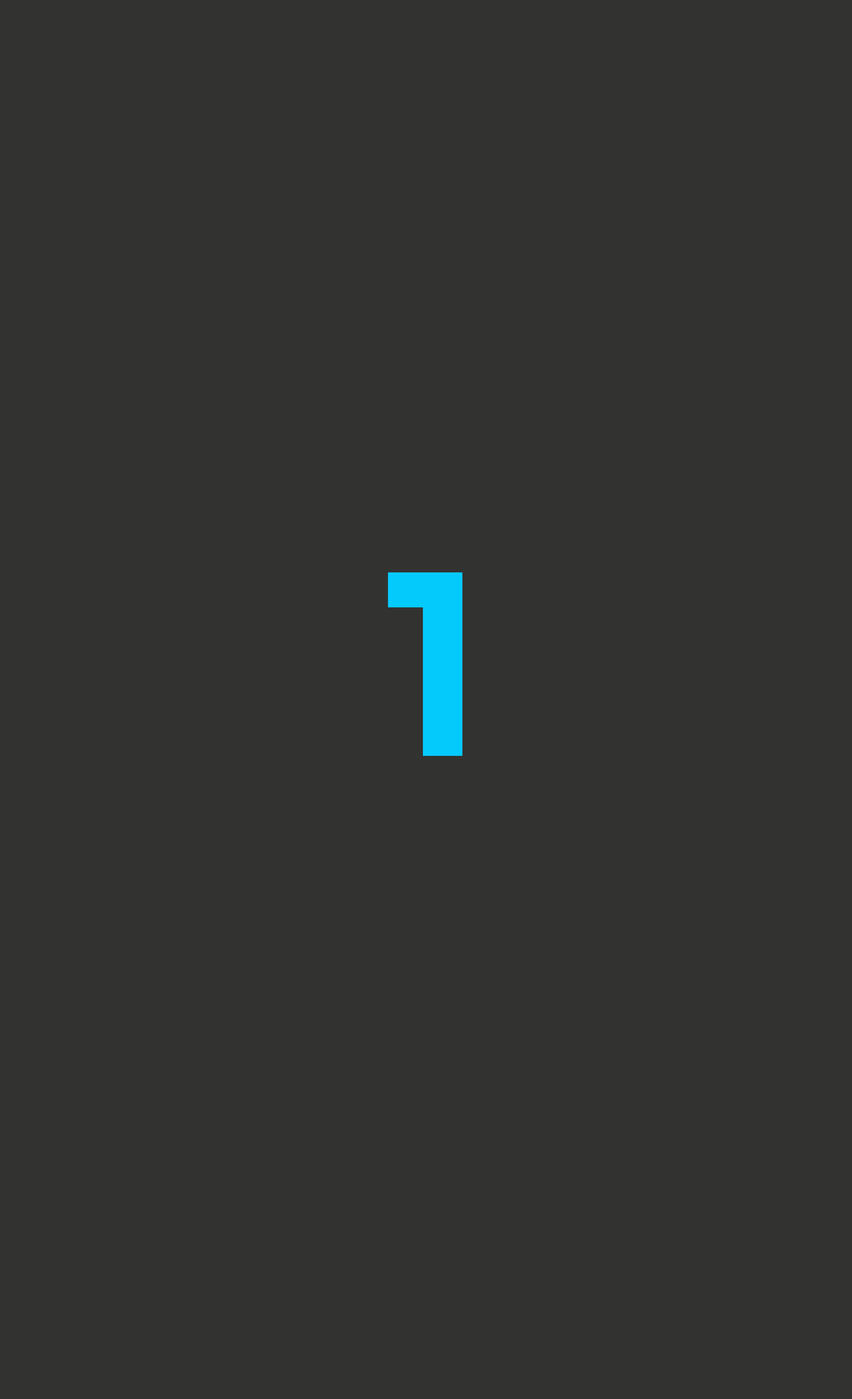
<style>
.page{position:relative;width:852px;height:1399px;background:#323231}
.page>*{position:absolute;margin:0}
.t1{font:262.4px "Montserrat-Bold";letter-spacing:0.04em;color:#04cafc}
</style>
<div class="page">
<p class="t1" style="left:388px;top:573px;width:74px;height:183px">1</p>
</div>
